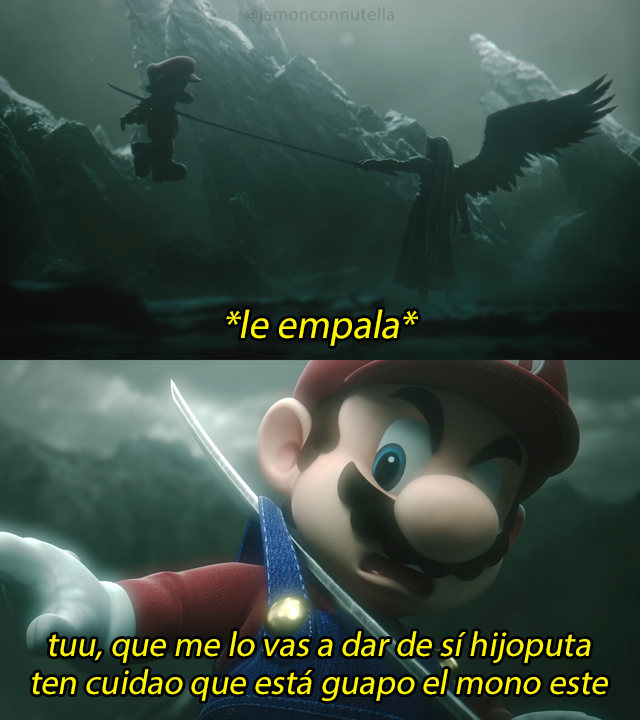
<style>
.page{position:relative;width:640px;height:720px}
.page>*{position:absolute;margin:0}
.t1{font:18.2px "MyriadPro-Regular";color:#80918d;font-weight:bold}
.t2{font:39.7px "MyriadPro-Regular";color:#fff700;font-style:italic}
.t3{font:34.7px "MyriadPro-Regular";color:#fff700;font-style:italic}
</style>
<div class="page">
<p class="t1" style="left:245px;top:7px;width:150px;height:17px">@jamonconnutella</p>
<p class="t2" style="left:226px;top:309px;width:192px;height:37px">*le empala*</p>
<p class="t3" style="left:32px;top:631px;width:576px;height:70px;text-align:center">tuu, que me lo vas a dar de sí hijoputa<br>ten cuidao que está guapo el mono este</p>
</div>
